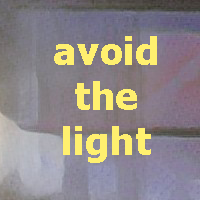
<style>
.page{position:relative;width:200px;height:200px}
.page>*{position:absolute;margin:0}
.t1{font:37.5px "Tahoma-Bold";letter-spacing:0.02em;color:#fff06f}
</style>
<div class="page">
<p class="t1" style="left:54px;top:36px;width:103px;height:127px;text-align:center">avoid<br>the<br>light</p>
</div>
